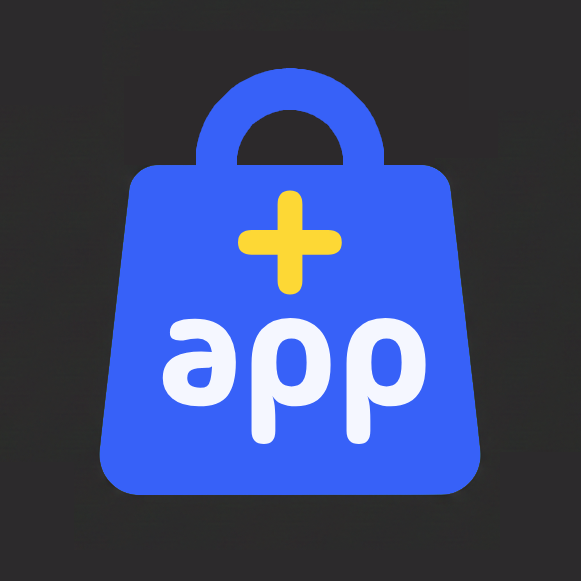
<style>
.page{position:relative;width:581px;height:581px;background:#3761f8}
.page>*{position:absolute;margin:0}
.t1{font:200px "MadimiOne-Regular";color:#fdd835}
.t2{font:170px "MadimiOne-Regular";color:#f5f7ff}
</style>
<div class="page">
<p class="t1" style="left:238px;top:190px;width:104px;height:105px">+</p>
<p class="t2" style="left:162px;top:317px;width:264px;height:128px">app</p>
</div>
